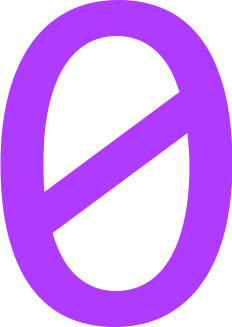
<style>
.page{position:relative;width:232px;height:327px;background:#af3bff}
.page>*{position:absolute;margin:0}
.t1{font:500px "Consolas";color:#af3bff}
</style>
<div class="page">
<p class="t1" style="left:0px;top:0px;width:233px;height:327px">0</p>
</div>
